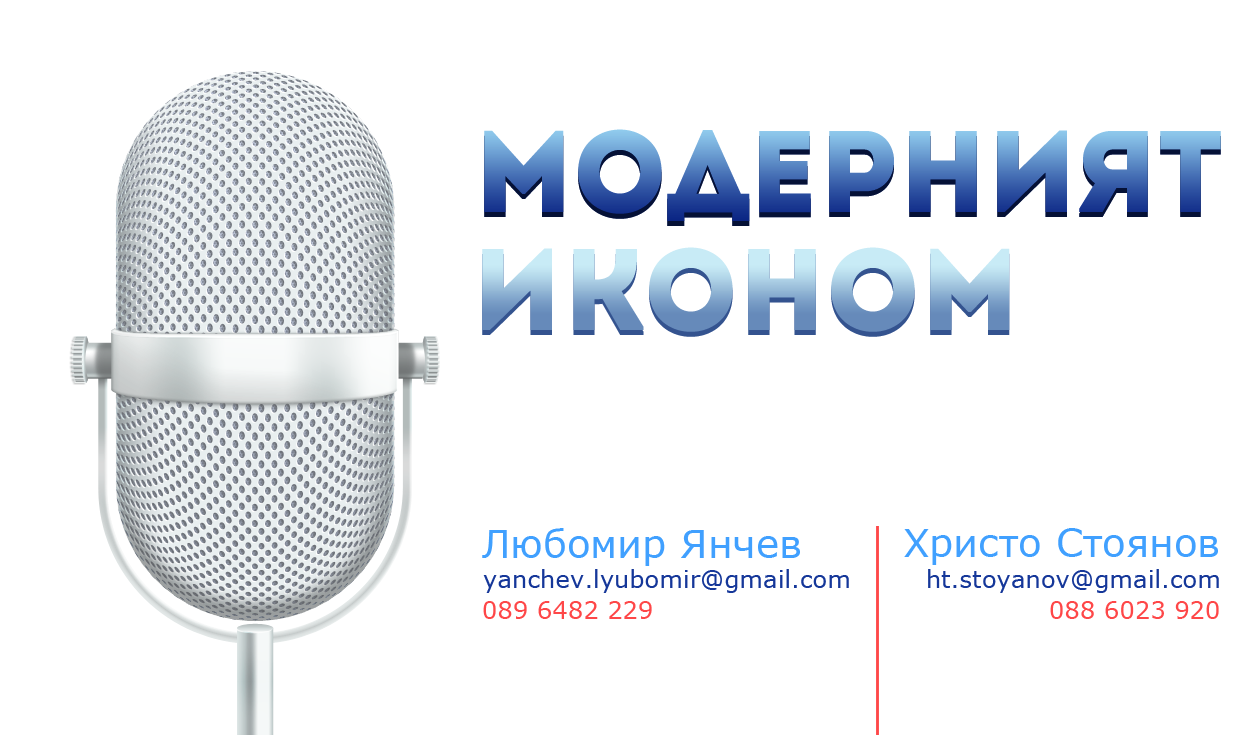
<style>
.page{position:relative;width:1260px;height:735px;background:#ffffff}
.page>*{position:absolute;margin:0}
.t1{font:115.6px "Intro"}
.t2{font:38.9px "Verdana";color:#40a0ff}
.t3{font:24.3px "Verdana";color:#153799}
.t4{font:24.3px "Verdana";color:#fe4748}
</style>
<div class="page">
<p class="t1" style="left:484px;top:134px;width:737px;height:92px">Модерният</p>
<p class="t1" style="left:484px;top:129px;width:737px;height:92px">Модерният</p>
<p class="t1" style="left:482px;top:252px;width:528px;height:85px">иконом</p>
<p class="t1" style="left:482px;top:247px;width:528px;height:85px">иконом</p>
<p class="t2" style="left:482px;top:528px;width:318px;height:38px">Любомир Янчев</p>
<p class="t2" style="left:904px;top:528px;width:314px;height:37px">Христо Стоянов</p>
<p class="t3" style="left:483px;top:569px;width:366px;height:24px">yanchev.lyubomir@gmail.com</p>
<p class="t3" style="left:928px;top:569px;width:291px;height:24px">ht.stoyanov@gmail.com</p>
<p class="t4" style="left:483px;top:601px;width:169px;height:18px">089 6482 229</p>
<p class="t4" style="left:1050px;top:601px;width:169px;height:18px">088 6023 920</p>
</div>
